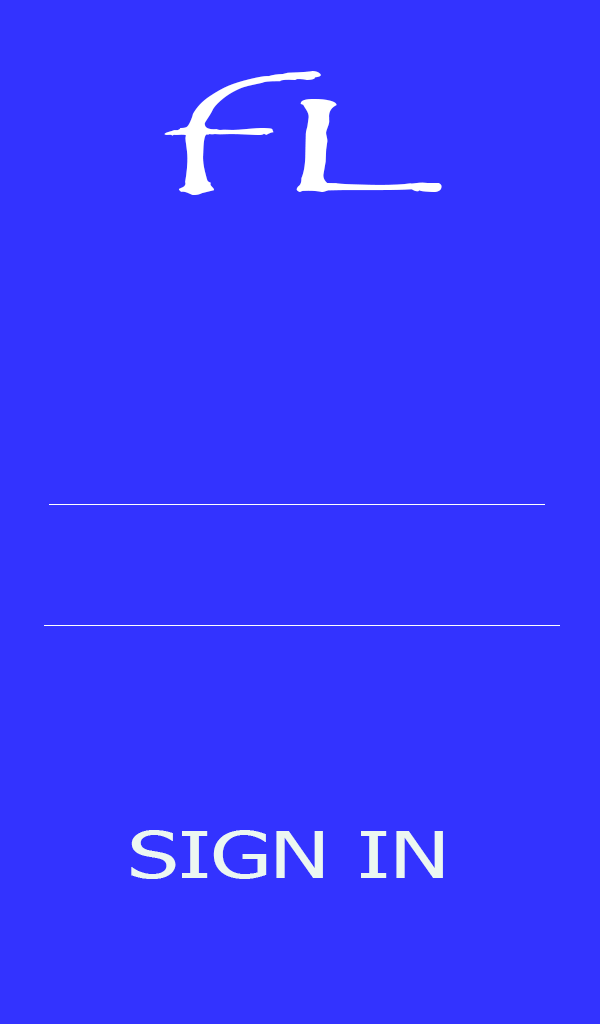
<style>
.page{position:relative;width:600px;height:1024px;background:#3333ff}
.page>*{position:absolute;margin:0}
.t1{font:135.2px "TempusSansITC";color:#ffffff;scale:2.71 1}
.t2{font:64.9px "Tahoma";color:#ecf7f1;scale:1.37 1}
</style>
<div class="page">
<p class="t1" style="left:164px;top:71px;width:278px;height:124px">fL</p>
<p class="t2" style="left:131px;top:830px;width:312px;height:49px">SIGN IN</p>
</div>
